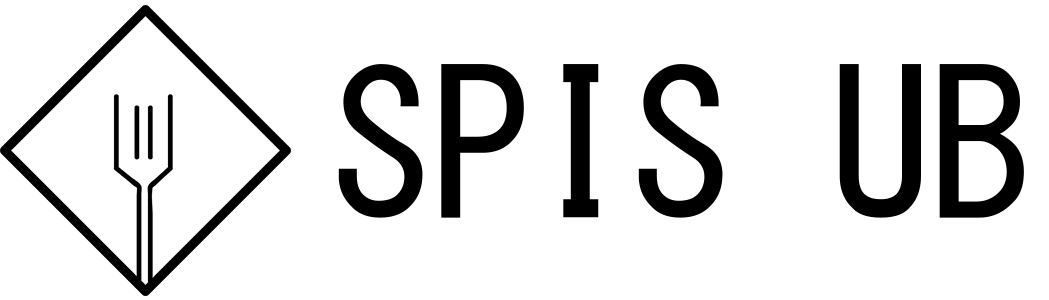
<style>
.page{position:relative;width:1049px;height:300px;background:#ffffff}
.page>*{position:absolute;margin:0}
.t1{font:200px "MS-Gothic";color:#000000}
</style>
<div class="page">
<p class="t1" style="left:338px;top:64px;width:686px;height:154px">SPIS UB</p>
</div>
